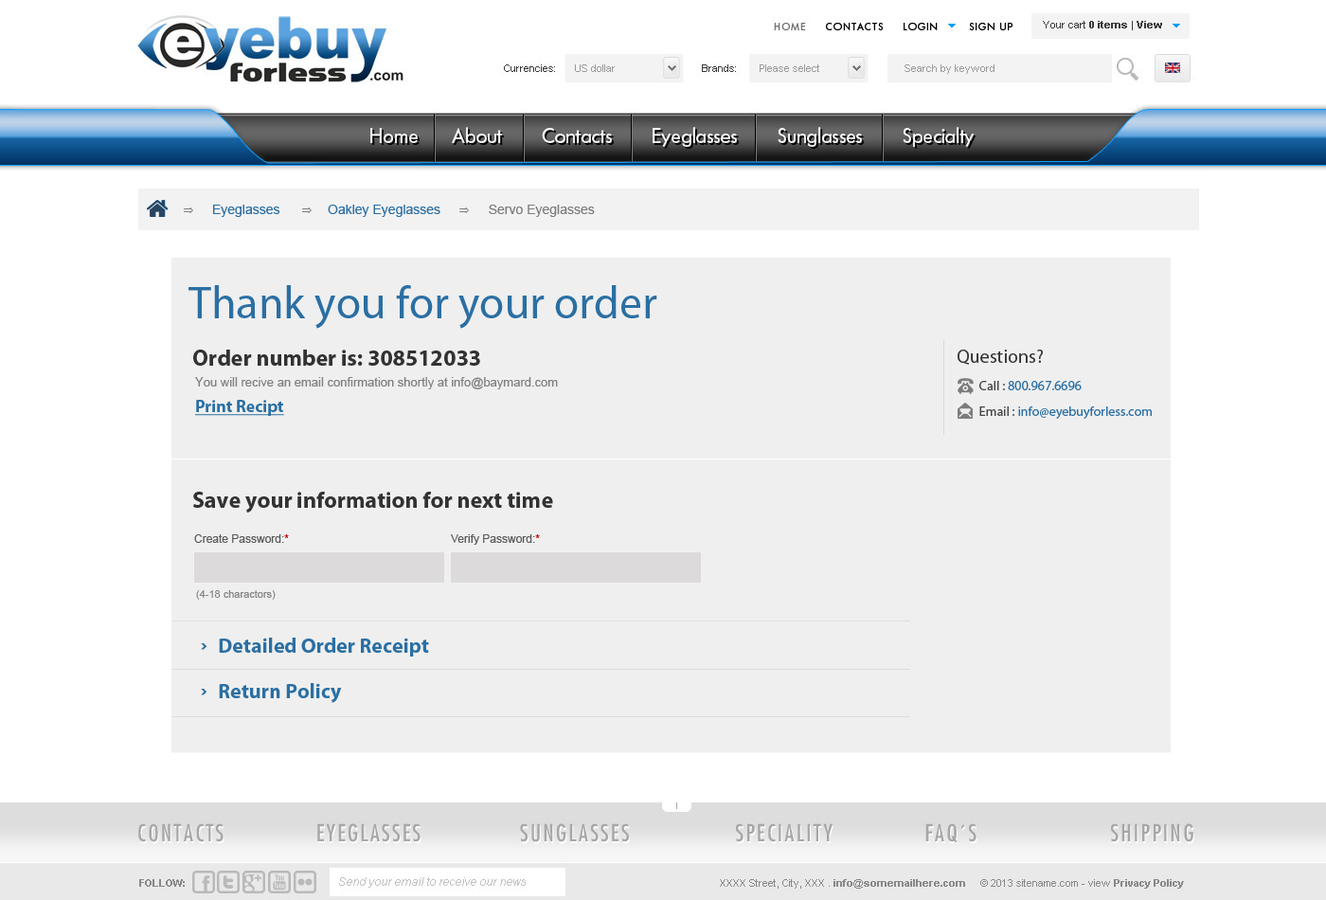
<style>
.page{position:relative;width:1326px;height:900px;background:#efefef}
.page>*{position:absolute;margin:0}
.t1{font:13.3px "ArialMT";color:#2b6fa3}
.t2{font:13.3px "ArialMT";color:#7f7f7f}
.t3{font:45.4px "MyriadPro-Regular";color:#2b6fa3}
.t4{font:22.7px "MyriadPro-Bold";color:#323232}
.t5{font:18.9px "MyriadPro-Regular";color:#323232}
.t6{font:12.3px "ArialMT";color:#818181}
.t7{font:13.3px "MyriadPro-Regular";color:#2b6fa3}
.t8{font:13.3px "MyriadPro-Regular";color:#454545}
.t9{font:17px "MyriadPro-Bold";color:#2b6fa3;text-decoration:underline}
.t10{font:11.4px "ArialMT";color:#5b5b5b}
.t11{font:11.4px "ArialMT";color:#c90505}
.t12{font:10.4px "ArialMT";color:#868686}
.t13{font:20.8px "MyriadPro-Bold";color:#2b6fa3}
</style>
<div class="page">
<p class="t1" style="left:213px;top:205px;width:382px;height:12px">Eyeglasses             Oakley Eyeglasses             <span class="t2">Servo Eyeglasses</span></p>
<p class="t3" style="left:188px;top:285px;width:469px;height:44px">Thank you for your order</p>
<p class="t4" style="left:193px;top:349px;width:287px;height:16px">Order number is: 308512033</p>
<p class="t5" style="left:957px;top:349px;width:86px;height:16px">Questions?</p>
<p class="t6" style="left:195px;top:377px;width:363px;height:12px">You will recive an email confirmation shortly at info@baymard.com</p>
<p class="t7" style="left:979px;top:381px;width:102px;height:9px"><span class="t8">Call : </span>800.967.6696</p>
<p class="t9" style="left:195px;top:400px;width:89px;height:16px">Print Recipt</p>
<p class="t7" style="left:979px;top:406px;width:172px;height:13px"><span class="t8">Email : </span>info@eyebuyforless.com</p>
<p class="t4" style="left:193px;top:491px;width:360px;height:21px">Save your information for next time</p>
<p class="t10" style="left:194px;top:534px;width:95px;height:9px">Create Password:<span class="t11">*</span></p>
<p class="t10" style="left:451px;top:534px;width:89px;height:10px">Verify Password:<span class="t11">*</span></p>
<p class="t12" style="left:196px;top:590px;width:80px;height:9px">(4-18 charactors)</p>
<p class="t13" style="left:219px;top:637px;width:210px;height:19px">Detailed Order Receipt</p>
<p class="t13" style="left:219px;top:683px;width:123px;height:20px">Return Policy</p>
</div>
